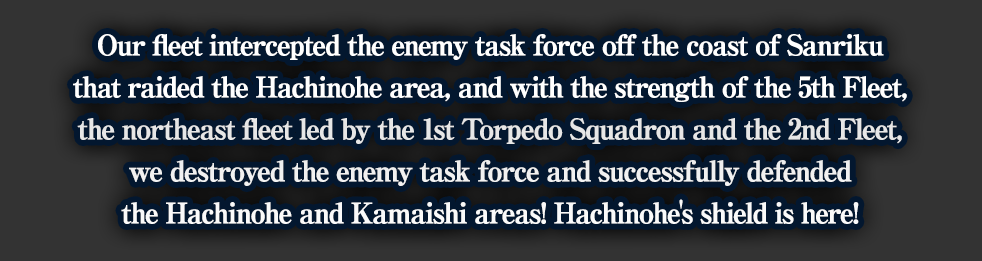
<style>
.page{position:relative;width:982px;height:261px;background:#03172f}
.page>*{position:absolute;margin:0}
.t1{font:28px/42px "RyuminPro-ExBold";letter-spacing:-0.08em;color:#ffffff;font-weight:bold}
</style>
<div class="page">
<p class="t1" style="left:73px;top:34px;width:834px;height:190px;text-align:center">Our fleet intercepted the enemy task force off the coast of Sanriku<br>that raided the Hachinohe area, and with the strength of the 5th Fleet,<br>the northeast fleet led by the 1st Torpedo Squadron and the 2nd Fleet,<br>we destroyed the enemy task force and successfully defended<br>the Hachinohe and Kamaishi areas! Hachinohe's shield is here!</p>
</div>
